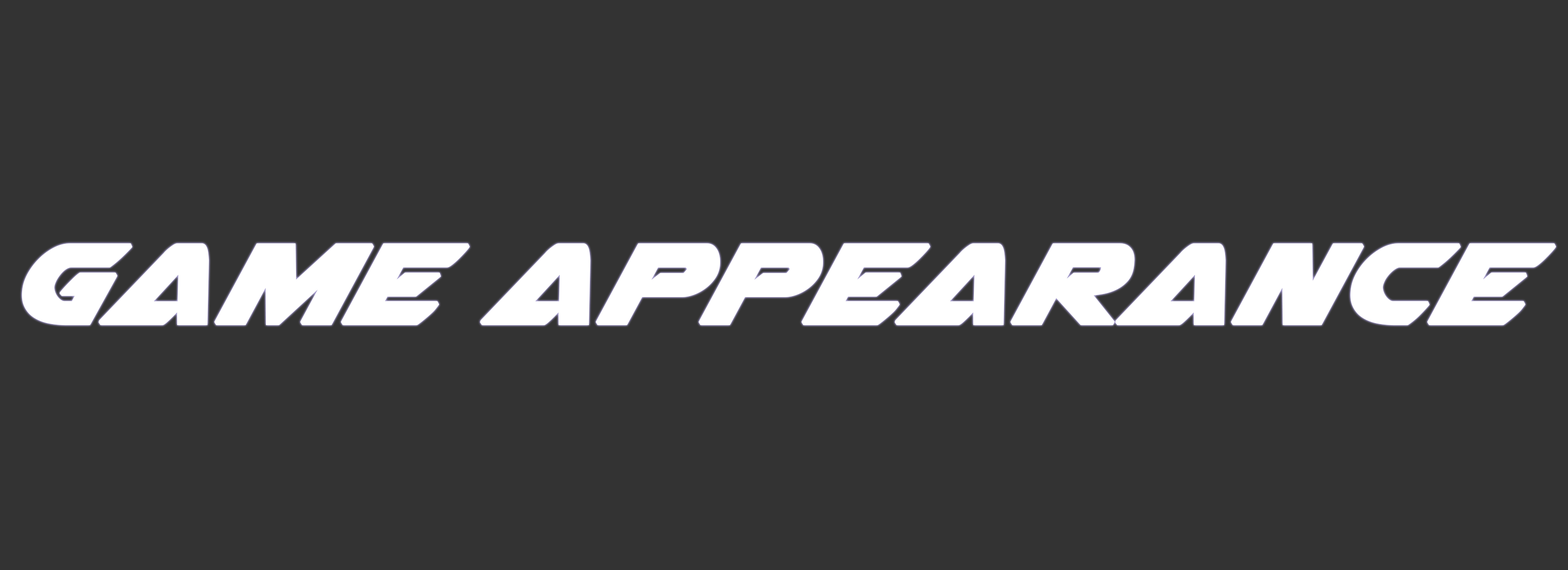
<style>
.page{position:relative;width:1568px;height:570px;background:#333333}
.page>*{position:absolute;margin:0}
.t1{font:146px "Airstrike";color:#ffffff;font-weight:bold;font-style:italic}
</style>
<div class="page">
<p class="t1" style="left:22px;top:243px;width:1534px;height:83px">game appearance</p>
</div>
